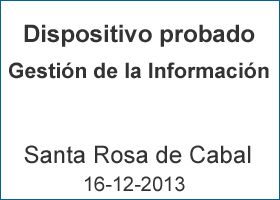
<style>
.page{position:relative;width:280px;height:200px;background:#ffffff}
.page>*{position:absolute;margin:0}
.t1{font:24px "Arial-BoldMT";color:#333333}
.t2{font:21.3px "Arial-BoldMT";color:#333333}
.t3{font:24px "ArialMT";color:#333333}
.t4{font:20px "ArialMT";color:#333333}
</style>
<div class="page">
<p class="t1" style="left:24px;top:24px;width:231px;height:23px">Dispositivo probado</p>
<p class="t2" style="left:9px;top:62px;width:260px;height:17px">Gestión de la Información</p>
<p class="t3" style="left:24px;top:145px;width:227px;height:19px">Santa Rosa de Cabal</p>
<p class="t4" style="left:85px;top:176px;width:100px;height:16px">16-12-2013</p>
</div>
